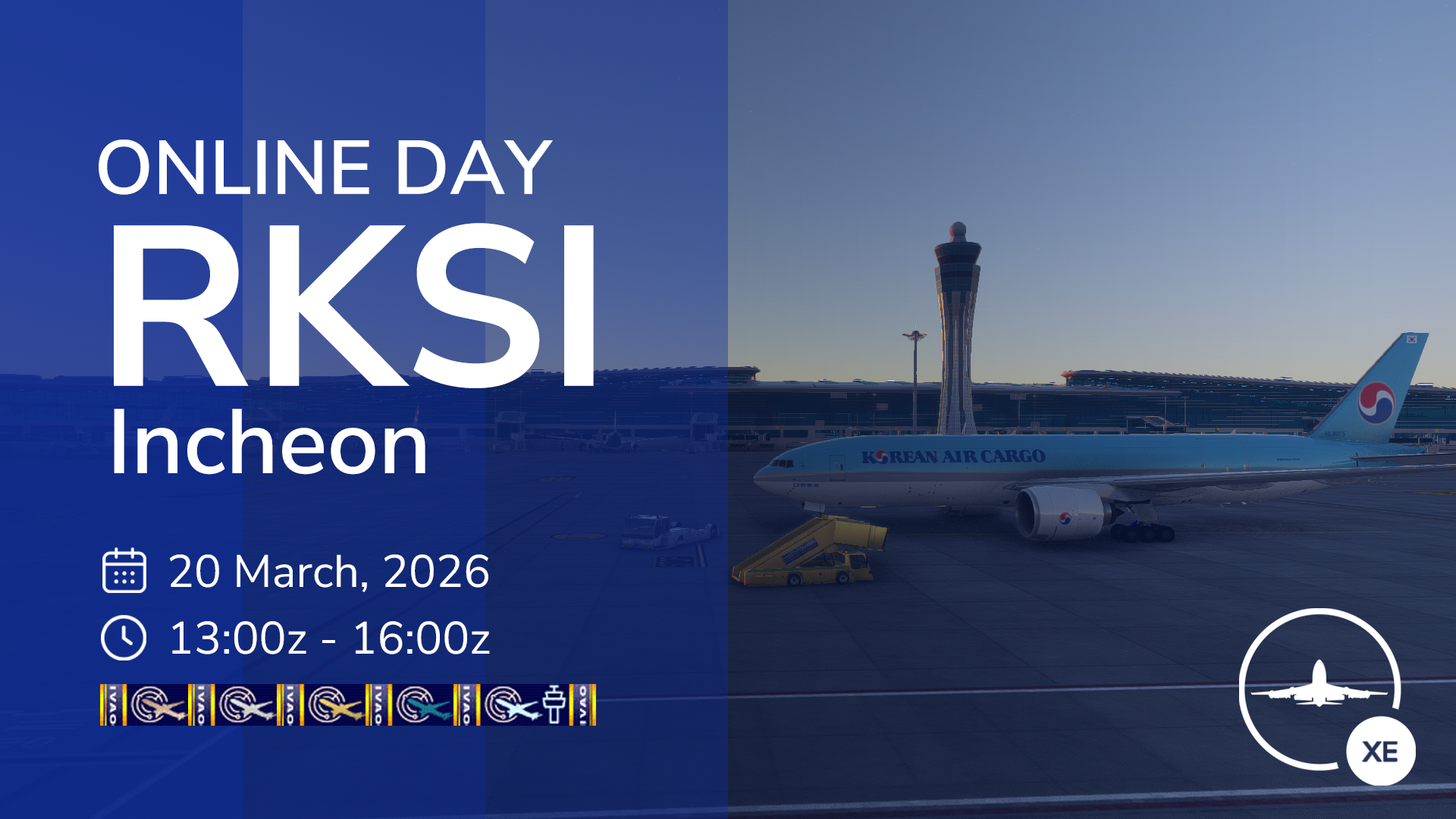
<style>
.page{position:relative;width:1456px;height:819px}
.page>*{position:absolute;margin:0}
.t1{font:75.8px "NunitoSans-SemiBold";color:#ffffff}
.t2{font:227.4px "NunitoSans-Bold";color:#ffffff}
.t3{font:90.9px "NunitoSans-SemiBold";color:#ffffff}
.t4{font:45.5px "NunitoSans-Regular";color:#ffffff}
</style>
<div class="page">
<p class="t1" style="left:99px;top:140px;width:454px;height:55px">ONLINE DAY</p>
<p class="t2" style="left:114px;top:223px;width:480px;height:165px">RKSI</p>
<p class="t3" style="left:114px;top:409px;width:311px;height:66px">Incheon</p>
<p class="t4" style="left:169px;top:554px;width:319px;height:38px">20 March, 2026</p>
<p class="t4" style="left:172px;top:621px;width:318px;height:33px">13:00z - 16:00z</p>
</div>
